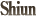
<style>
.page{position:relative;width:36px;height:18px;background:#ffffff}
.page>*{position:absolute;margin:0}
.t1{font:18px "RyuminPro-ExBold";letter-spacing:-0.1em;color:#4a3f32;font-weight:bold;scale:0.85 1}
</style>
<div class="page">
<p class="t1" style="left:0px;top:1px;width:37px;height:15px">Shiun</p>
</div>
